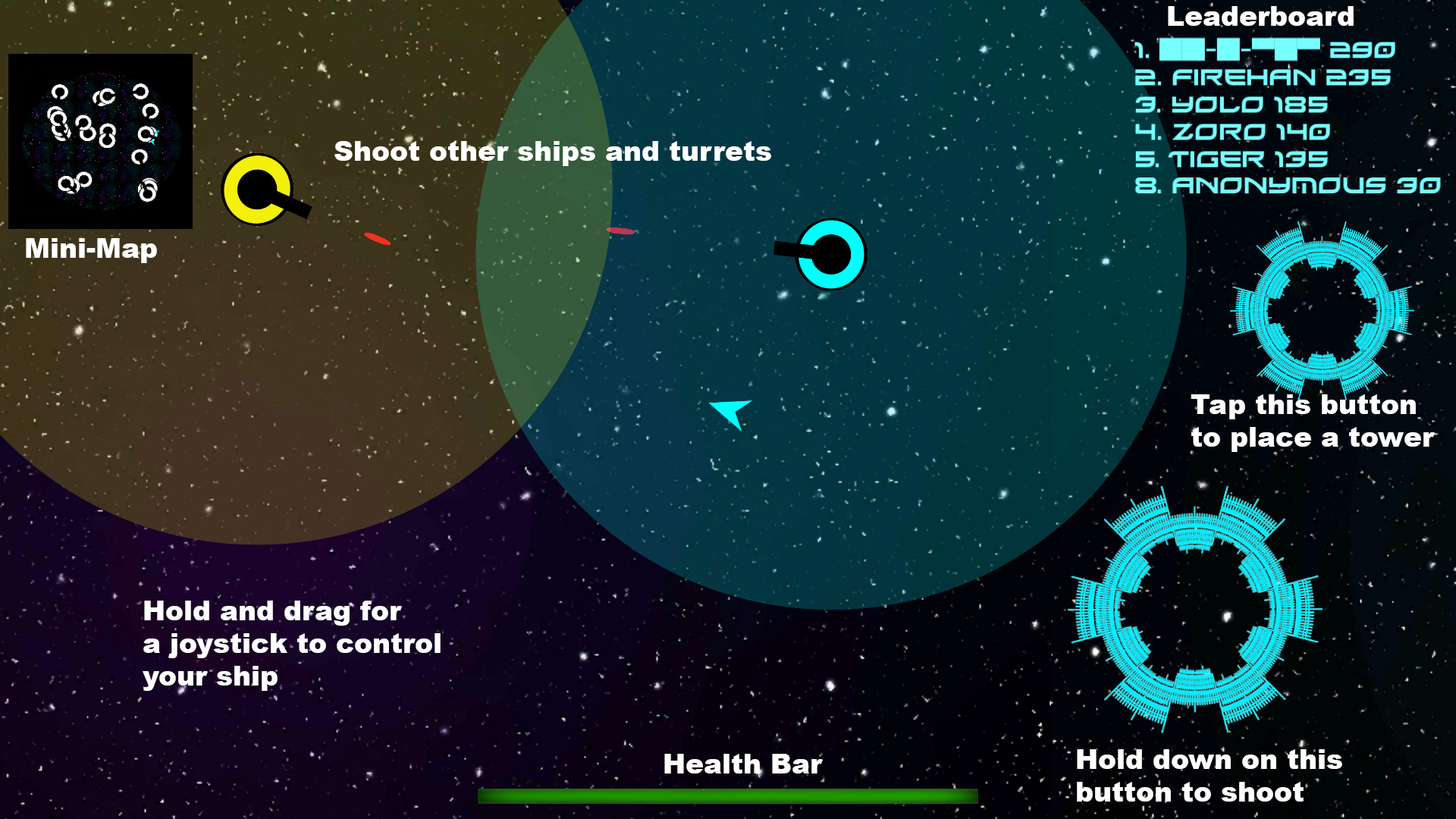
<style>
.page{position:relative;width:1456px;height:819px}
.page>*{position:absolute;margin:0}
.t1{font:27.3px "Arial-Black";color:#ffffff}
</style>
<div class="page">
<p class="t1" style="left:1168px;top:6px;width:186px;height:20px">Leaderboard</p>
<p class="t1" style="left:334px;top:141px;width:437px;height:25px">Shoot other ships and turrets</p>
<p class="t1" style="left:26px;top:238px;width:131px;height:25px">Mini-Map</p>
<p class="t1" style="left:1191px;top:394px;width:244px;height:58px">Tap this button<br>to place a tower</p>
<p class="t1" style="left:143px;top:601px;width:298px;height:90px">Hold and drag for<br>a joystick to control<br>your ship</p>
<p class="t1" style="left:1077px;top:749px;width:265px;height:53px">Hold down on this <br>button to shoot</p>
<p class="t1" style="left:664px;top:754px;width:159px;height:19px">Health Bar</p>
</div>
